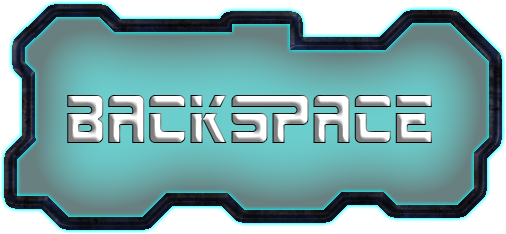
<style>
.page{position:relative;width:506px;height:234px}
.page>*{position:absolute;margin:0}
.t1{font:48px "SPACEBAR"}
</style>
<div class="page">
<p class="t1" style="left:67px;top:95px;width:365px;height:48px">backspace</p>
</div>
